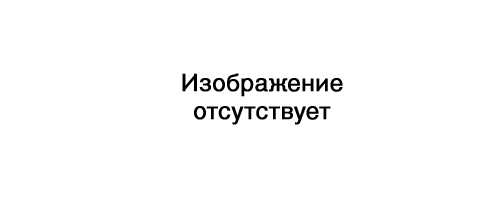
<style>
.page{position:relative;width:500px;height:200px;background:#ffffff}
.page>*{position:absolute;margin:0}
.t1{font:24px "HelveticaWorld-Regular";color:#000000;font-weight:bold}
</style>
<div class="page">
<p class="t1" style="left:182px;top:73px;width:161px;height:52px;text-align:center">Изображение<br>отсутствует</p>
</div>
